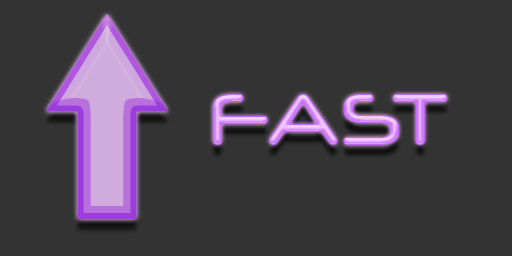
<style>
.page{position:relative;width:512px;height:256px;background:#333333}
.page>*{position:absolute;margin:0}
.t1{font:70px "NeuropolXFree";text-transform:uppercase}
</style>
<div class="page">
<p class="t1" style="left:213px;top:95px;width:234px;height:49px">fast</p>
</div>
